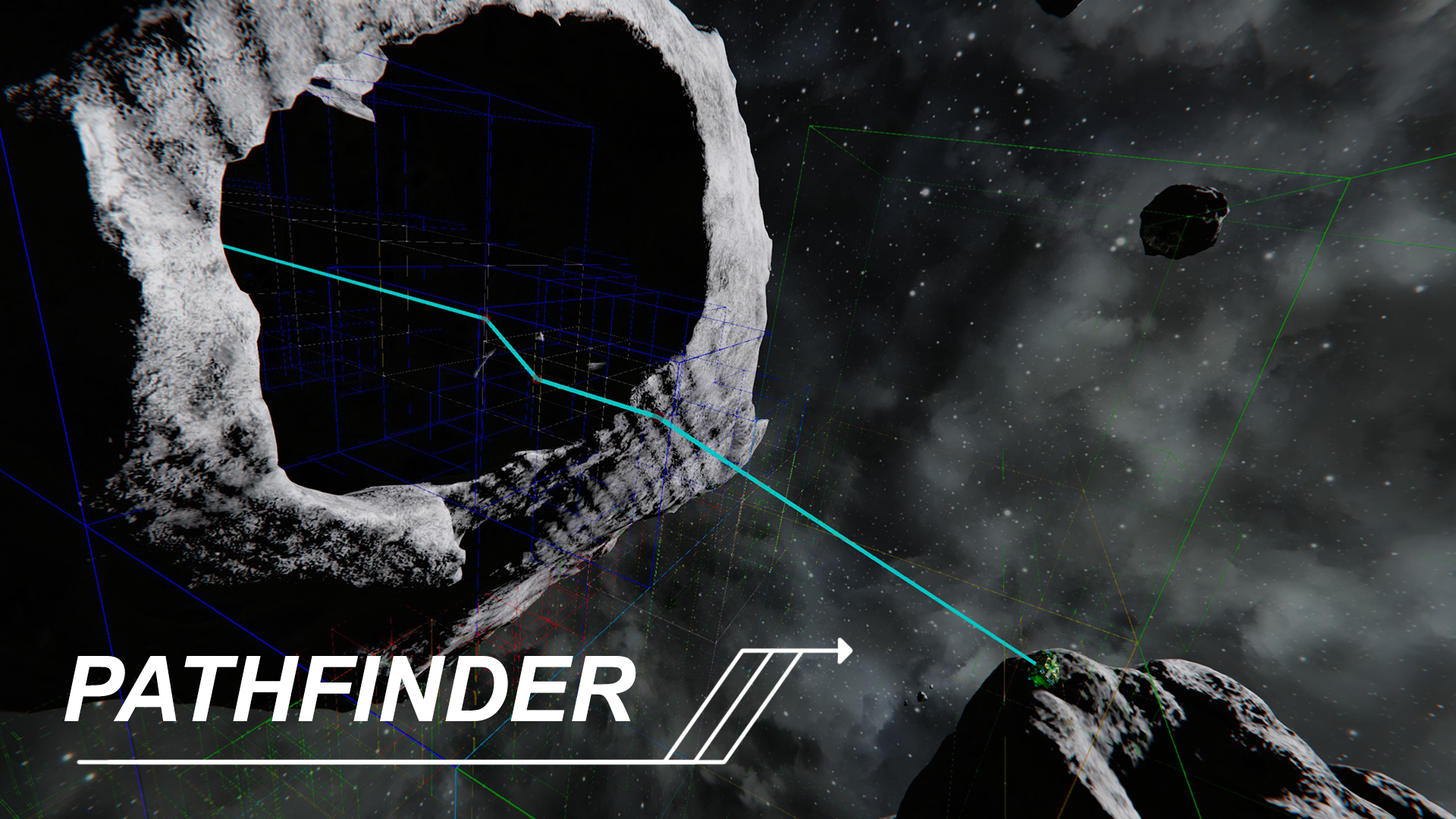
<style>
.page{position:relative;width:1456px;height:819px}
.page>*{position:absolute;margin:0}
.t1{font:91px "Arial-BoldItalicMT";color:#ffffff}
</style>
<div class="page">
<p class="t1" style="left:64px;top:656px;width:572px;height:65px">PATHFINDER</p>
</div>
